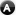
<style>
.page{position:relative;width:16px;height:15px}
.page>*{position:absolute;margin:0}
.t1{font:10px "ArialMT";color:#ffffff;font-weight:bold}
</style>
<div class="page">
<p class="t1" style="left:3px;top:4px;width:8px;height:8px">A</p>
</div>
